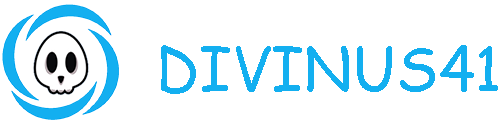
<style>
.page{position:relative;width:500px;height:122px;background:#ffffff}
.page>*{position:absolute;margin:0}
.t1{font:60px "ComicSansMS";color:#13aff0}
</style>
<div class="page">
<p class="t1" style="left:161px;top:45px;width:337px;height:49px">DIVINUS41</p>
</div>
